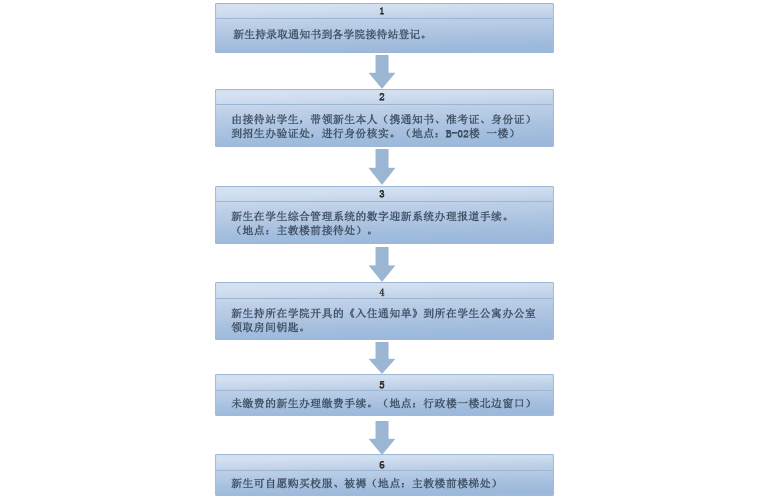
<style>
.page{position:relative;width:768px;height:500px;background:#ffffff}
.page>*{position:absolute;margin:0}
.t1{font:11px "SimSun";letter-spacing:-0.025em;color:#313131;font-weight:bold}
.t2{font:11px "SimSun";letter-spacing:-0.025em;color:#3c4d61;font-weight:bold}
.t3{font:11px/14px "SimSun";color:#3c4d61;font-weight:bold}
.t4{font:11px "SimSun";color:#3c4d61;font-weight:bold}
</style>
<div class="page">
<p class="t1" style="left:380px;top:7px;width:4px;height:8px">1</p>
<p class="t2" style="left:233px;top:28px;width:192px;height:12px">新生持录取通知书到各学院接待站登记。</p>
<p class="t1" style="left:379px;top:93px;width:6px;height:8px">2</p>
<p class="t3" style="left:231px;top:113px;width:299px;height:26px">由接待站学生，带领新生本人（携通知书、准考证、身份证）<br>到招生办验证处，进行身份核实。（地点：B-02楼 一楼）</p>
<p class="t1" style="left:379px;top:190px;width:6px;height:8px">3</p>
<p class="t3" style="left:231px;top:210px;width:276px;height:26px">新生在学生综合管理系统的数字迎新系统办理报道手续。<br>（地点：主教楼前接待处）。</p>
<p class="t1" style="left:379px;top:288px;width:6px;height:9px">4</p>
<p class="t3" style="left:231px;top:307px;width:305px;height:26px">新生持所在学院开具的《入住通知单》到所在学生公寓办公室<br>领取房间钥匙。</p>
<p class="t1" style="left:379px;top:381px;width:6px;height:8px">5</p>
<p class="t4" style="left:231px;top:397px;width:299px;height:12px">未缴费的新生办理缴费手续。（地点：行政楼一楼北边窗口）</p>
<p class="t1" style="left:379px;top:461px;width:6px;height:8px">6</p>
<p class="t4" style="left:231px;top:477px;width:265px;height:12px">新生可自愿购买校服、被褥（地点：主教楼前楼梯处）</p>
</div>
